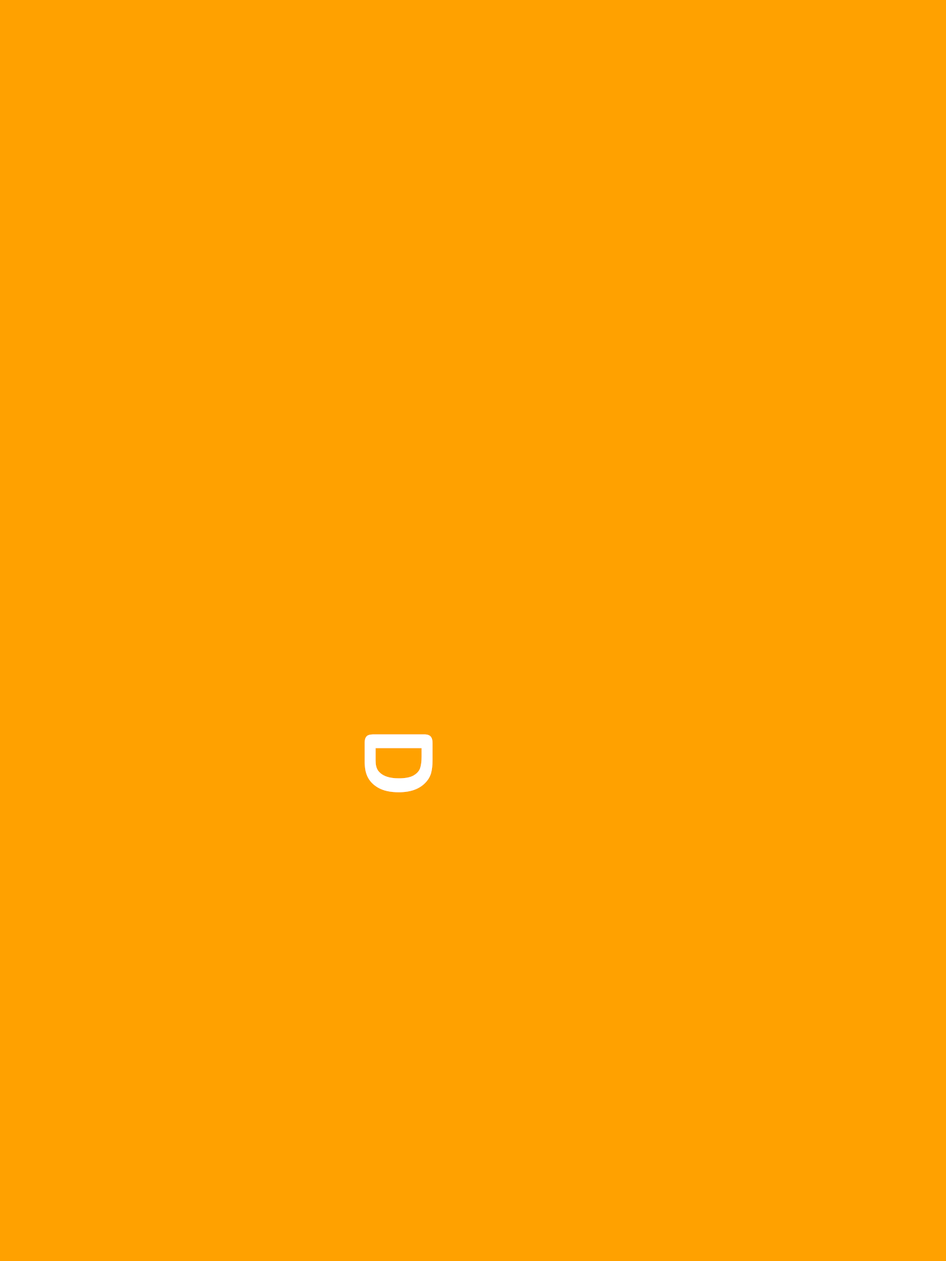
<style>
.page{position:relative;width:946px;height:1261px;background:#ffa100}
.page>*{position:absolute;margin:0}
.t1{font:94.6px "ArialRoundedMTBold";color:#ffffff}
</style>
<div class="page">
<p class="t1" style="left:364px;top:734px;width:68px;height:58px;rotate:90deg">D</p>
</div>
